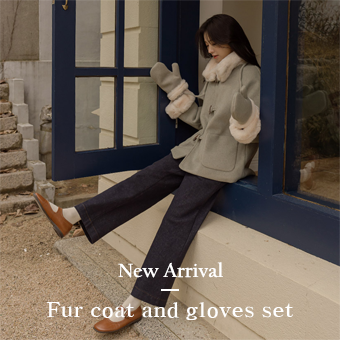
<style>
.page{position:relative;width:340px;height:340px}
.page>*{position:absolute;margin:0}
.t1{font:20px "CalifornianFB-Bold";color:#ffffff}
.t2{font:20px "H2mjrE";color:#ffffff}
</style>
<div class="page">
<p class="t1" style="left:118px;top:262px;width:105px;height:16px">New Arrival</p>
<p class="t2" style="left:47px;top:302px;width:246px;height:18px">Fur coat and gloves set</p>
</div>
